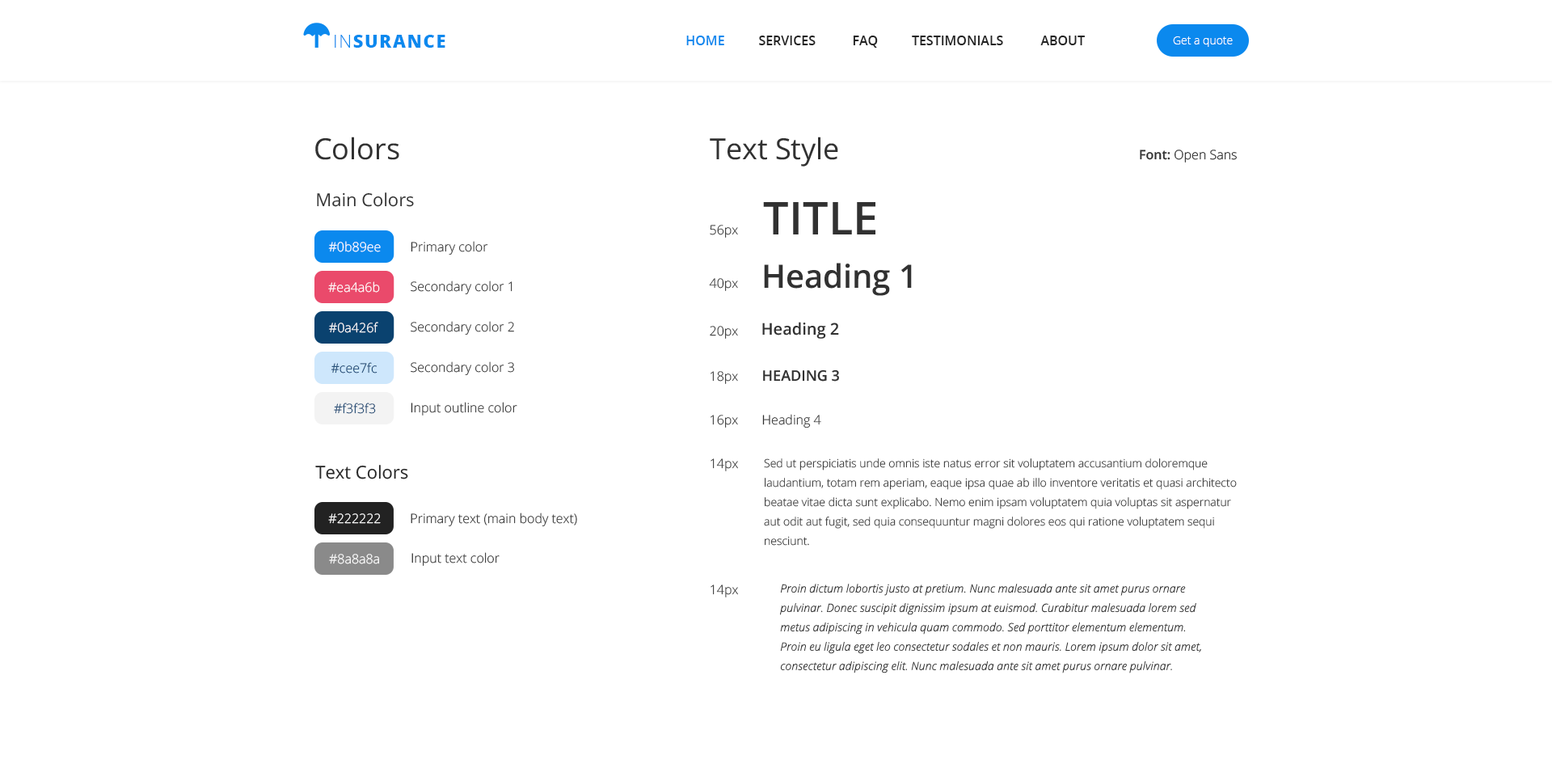
<style>
.page{position:relative;width:1552px;height:768px;background:#ffffff}
.page>*{position:absolute;margin:0}
.t1{font:17.8px "OpenSans-Extrabold";letter-spacing:0.075em;color:#0b89ee;text-transform:uppercase}
.t2{font:17.8px "OpenSans-Light";letter-spacing:0.075em;color:#0b89ee;text-transform:uppercase}
.t3{font:12.9px "OpenSans-Semibold";color:#0b89ee;text-transform:uppercase}
.t4{font:12.9px "OpenSans-Semibold";color:#232323;text-transform:uppercase}
.t5{font:12.9px "OpenSans-Semibold";color:#232323}
.t6{font:11.3px "OpenSans-Light";color:#ffffff}
.t7{font:29.1px "OpenSans-Regular";color:#313131}
.t8{font:12.9px "OpenSans-Light";color:#313131}
.t9{font:12.9px "OpenSans-SemiBold";color:#313131}
.t10{font:17.8px "OpenSans";color:#313131}
.t11{font:45.3px "OpenSans-SemiBold";color:#313131;text-transform:uppercase}
.t12{font:12.9px "OpenSans-Light";color:#ffffff}
.t13{font:32.3px "OpenSans-SemiBold";color:#313131}
.t14{font:16.2px "OpenSans-SemiBold";color:#313131}
.t15{font:12.9px "OpenSans-Light"}
.t16{font:14.6px "OpenSans-SemiBold";color:#313131;text-transform:uppercase}
.t17{font:11.3px/19.4px "OpenSans-Light";color:#313131}
.t18{font:17.8px "OpenSans-Regular";color:#282828}
.t19{font:11.3px/19.4px "OpenSans-LightItalic";color:#313131}
</style>
<div class="page">
<p class="t1" style="left:335px;top:35px;width:111px;height:13px"><span class="t2">In</span>surance</p>
<p class="t3" style="left:686px;top:36px;width:38px;height:9px">Home</p>
<p class="t4" style="left:759px;top:36px;width:57px;height:9px">Services</p>
<p class="t5" style="left:853px;top:36px;width:25px;height:12px">FAQ</p>
<p class="t4" style="left:912px;top:36px;width:91px;height:9px">Testimonials</p>
<p class="t4" style="left:1041px;top:36px;width:44px;height:9px">About</p>
<p class="t6" style="left:1173px;top:36px;width:60px;height:11px">Get a quote</p>
<p class="t7" style="left:315px;top:137px;width:84px;height:23px">Colors</p>
<p class="t7" style="left:710px;top:137px;width:128px;height:30px">Text Style</p>
<p class="t8" style="left:1140px;top:150px;width:97px;height:13px"><span class="t9">Font:</span> Open Sans</p>
<p class="t10" style="left:317px;top:192px;width:97px;height:15px">Main Colors</p>
<p class="t11" style="left:763px;top:202px;width:113px;height:32px">Title</p>
<p class="t8" style="left:710px;top:225px;width:28px;height:13px">56px</p>
<p class="t12" style="left:328px;top:241px;width:53px;height:11px">#0b89ee</p>
<p class="t8" style="left:411px;top:241px;width:77px;height:14px">Primary color</p>
<p class="t13" style="left:764px;top:263px;width:148px;height:33px">Heading 1</p>
<p class="t12" style="left:328px;top:281px;width:52px;height:12px">#ea4a6b</p>
<p class="t8" style="left:411px;top:281px;width:102px;height:13px">Secondary color 1</p>
<p class="t8" style="left:709px;top:278px;width:29px;height:13px">40px</p>
<p class="t12" style="left:329px;top:322px;width:49px;height:11px">#0a426f</p>
<p class="t8" style="left:411px;top:321px;width:103px;height:14px">Secondary color 2</p>
<p class="t8" style="left:710px;top:326px;width:28px;height:13px">20px</p>
<p class="t14" style="left:762px;top:322px;width:77px;height:17px">Heading 2</p>
<p class="t15" style="left:331px;top:362px;width:47px;height:12px">#cee7fc</p>
<p class="t8" style="left:411px;top:361px;width:103px;height:14px">Secondary color 3</p>
<p class="t8" style="left:711px;top:371px;width:27px;height:13px">18px</p>
<p class="t16" style="left:763px;top:370px;width:76px;height:12px">Heading 3</p>
<p class="t8" style="left:411px;top:402px;width:106px;height:14px">Input outline color</p>
<p class="t15" style="left:334px;top:403px;width:42px;height:11px">#f3f3f3</p>
<p class="t8" style="left:762px;top:414px;width:59px;height:14px">Heading 4</p>
<p class="t8" style="left:711px;top:415px;width:27px;height:13px">16px</p>
<p class="t8" style="left:711px;top:458px;width:27px;height:13px">14px</p>
<p class="t17" style="left:764px;top:458px;width:473px;height:88px">Sed ut perspiciatis unde omnis iste natus error sit voluptatem accusantium doloremque laudantium, totam rem aperiam, eaque ipsa quae ab illo inventore veritatis et quasi architecto beatae vitae dicta sunt explicabo. Nemo enim ipsam voluptatem quia voluptas sit aspernatur aut odit aut fugit, sed quia consequuntur magni dolores eos qui ratione voluptatem sequi nesciunt.</p>
<p class="t18" style="left:315px;top:465px;width:93px;height:14px">Text Colors</p>
<p class="t12" style="left:328px;top:513px;width:53px;height:11px">#222222</p>
<p class="t8" style="left:411px;top:513px;width:166px;height:13px">Primary text (main body text)</p>
<p class="t12" style="left:329px;top:554px;width:50px;height:10px">#8a8a8a</p>
<p class="t8" style="left:412px;top:552px;width:88px;height:14px">Input text color</p>
<p class="t8" style="left:711px;top:585px;width:27px;height:13px">14px</p>
<p class="t19" style="left:780px;top:584px;width:421px;height:90px;text-align:right">Proin dictum lobortis justo at pretium. Nunc malesuada ante sit amet purus ornare pulvinar. Donec suscipit dignissim ipsum at euismod. Curabitur malesuada lorem sed metus adipiscing in vehicula quam commodo. Sed porttitor elementum elementum. Proin eu ligula eget leo consectetur sodales et non mauris. Lorem ipsum dolor sit amet, consectetur adipiscing elit. Nunc malesuada ante sit amet purus ornare pulvinar.</p>
</div>
